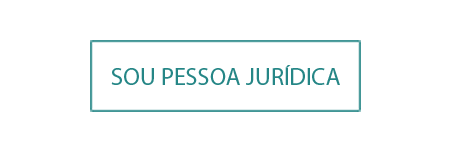
<style>
.page{position:relative;width:450px;height:150px;background:#ffffff}
.page>*{position:absolute;margin:0}
.t1{font:24.3px "MyriadPro-Regular";color:#258686}
</style>
<div class="page">
<p class="t1" style="left:111px;top:65px;width:229px;height:20px">SOU PESSOA JURÍDICA</p>
</div>
